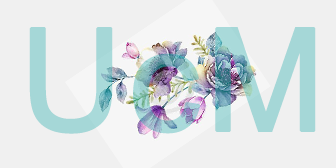
<style>
.page{position:relative;width:336px;height:168px;background:#f0f0f0}
.page>*{position:absolute;margin:0}
.t1{font:142.8px "ArialMT";letter-spacing:0.014em;color:#a5d7d7;font-weight:bold}
</style>
<div class="page">
<p class="t1" style="left:29px;top:27px;width:287px;height:107px">UcM</p>
</div>
